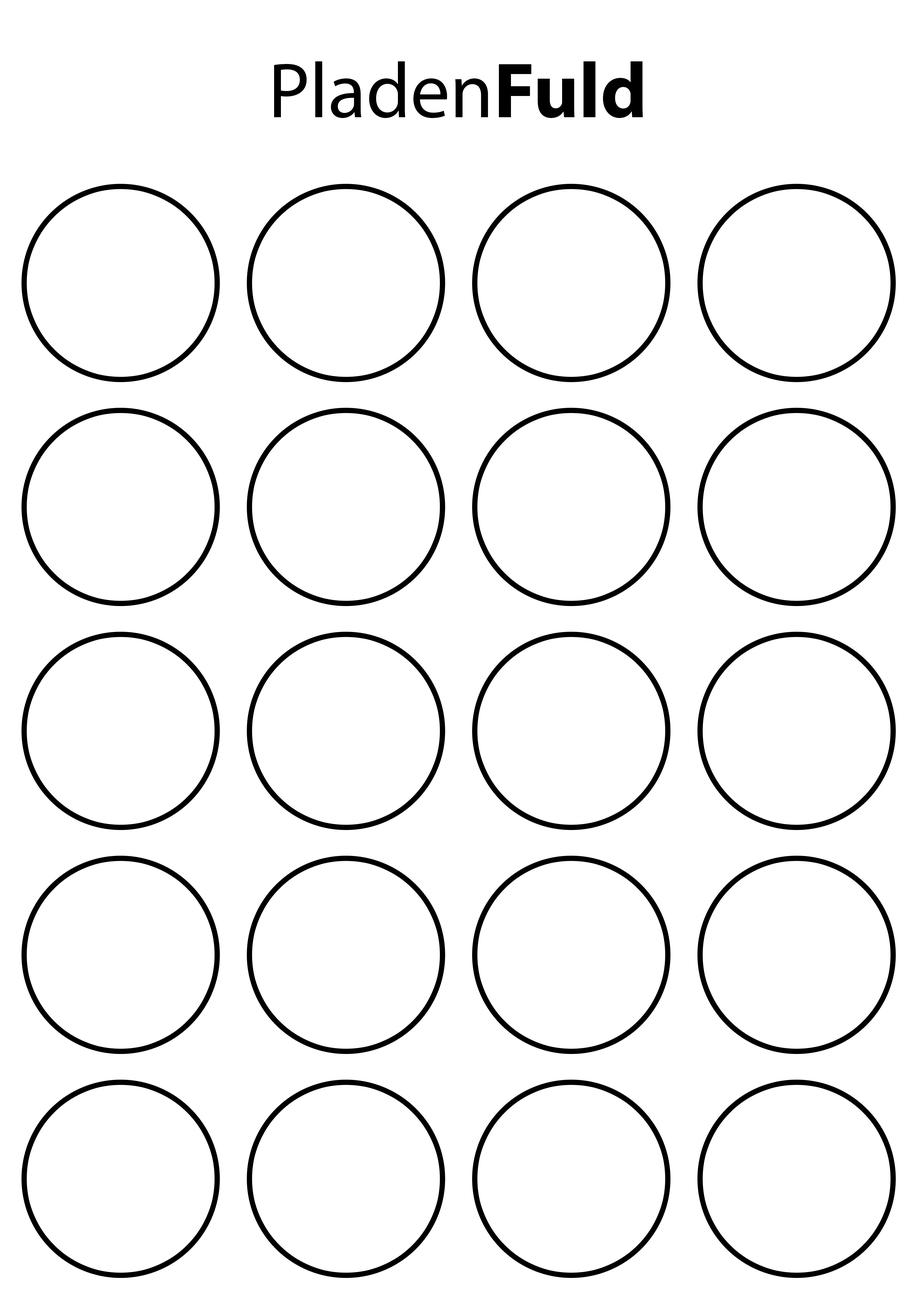
<style>
.page{position:relative;width:917px;height:1301px;background:#ffffff}
.page>*{position:absolute;margin:0}
.t1{font:78.7px "MyriadPro-Regular";color:#000000}
.t2{font:78.7px "MyriadPro-Bold";color:#000000}
</style>
<div class="page">
<p class="t1" style="left:274px;top:61px;width:369px;height:57px">Pladen<span class="t2">Fuld</span></p>
</div>
